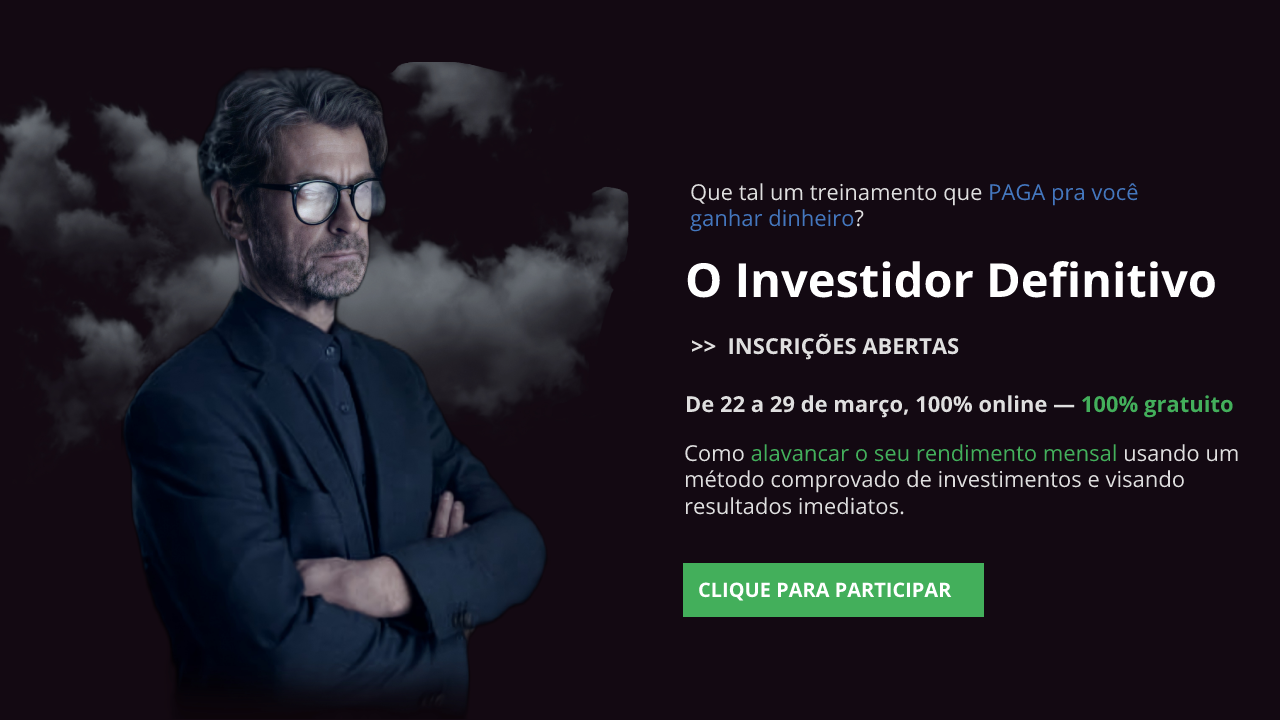
<style>
.page{position:relative;width:1280px;height:720px;background:#130912}
.page>*{position:absolute;margin:0}
.t1{font:22px "OpenSans-Regular";color:#4477be}
.t2{font:22px "OpenSans-Regular";color:#dfdfdf}
.t3{font:47px "OpenSans-Bold";color:#ffffff}
.t4{font:22px "OpenSans-Bold";color:#dfdfdf}
.t5{font:22px "OpenSans-Bold";color:#43af5b}
.t6{font:22px "OpenSans-Regular";color:#43af5b}
.t7{font:20px "OpenSans-Bold";color:#ffffff}
</style>
<div class="page">
<p class="t1" style="left:690px;top:183px;width:448px;height:49px"><span class="t2">Que tal um treinamento que </span>PAGA pra você ganhar dinheiro<span class="t2">?</span></p>
<p class="t3" style="left:687px;top:261px;width:528px;height:37px">O Investidor Definitivo</p>
<p class="t4" style="left:691px;top:333px;width:268px;height:27px">&gt;&gt;  INSCRIÇÕES ABERTAS</p>
<p class="t4" style="left:686px;top:395px;width:547px;height:23px">De 22 a 29 de março, 100% online — <span class="t5">100% gratuito</span></p>
<p class="t2" style="left:685px;top:444px;width:553px;height:71px">Como <span class="t6">alavancar o seu rendimento mensal </span>usando um método comprovado de investimentos e visando resultados imediatos.</p>
<p class="t7" style="left:699px;top:582px;width:253px;height:19px">CLIQUE PARA PARTICIPAR</p>
</div>
